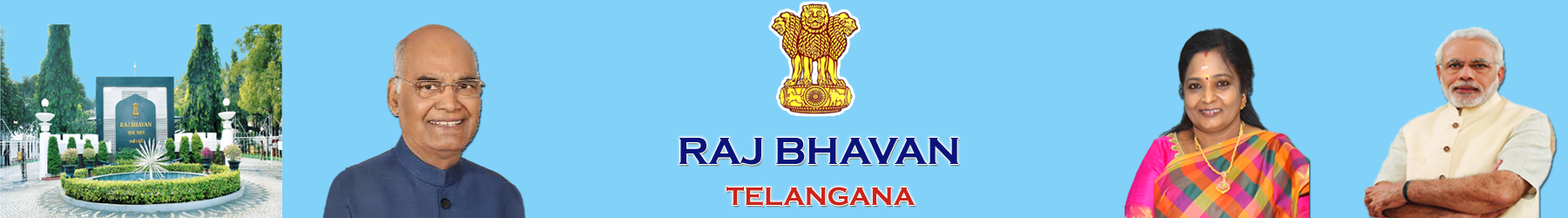
<style>
.page{position:relative;width:1568px;height:218px;background:#82d1f8}
.page>*{position:absolute;margin:0}
.t1{font:39.2px "CopperplateGothic-Bold";color:#09147b}
.t2{font:26.1px "CopperplateGothic-Bold";color:#cc231a}
</style>
<div class="page">
<p class="t1" style="left:679px;top:138px;width:280px;height:27px">RAJ BHAVAN</p>
<p class="t2" style="left:727px;top:186px;width:189px;height:20px">TELANGANA</p>
</div>
